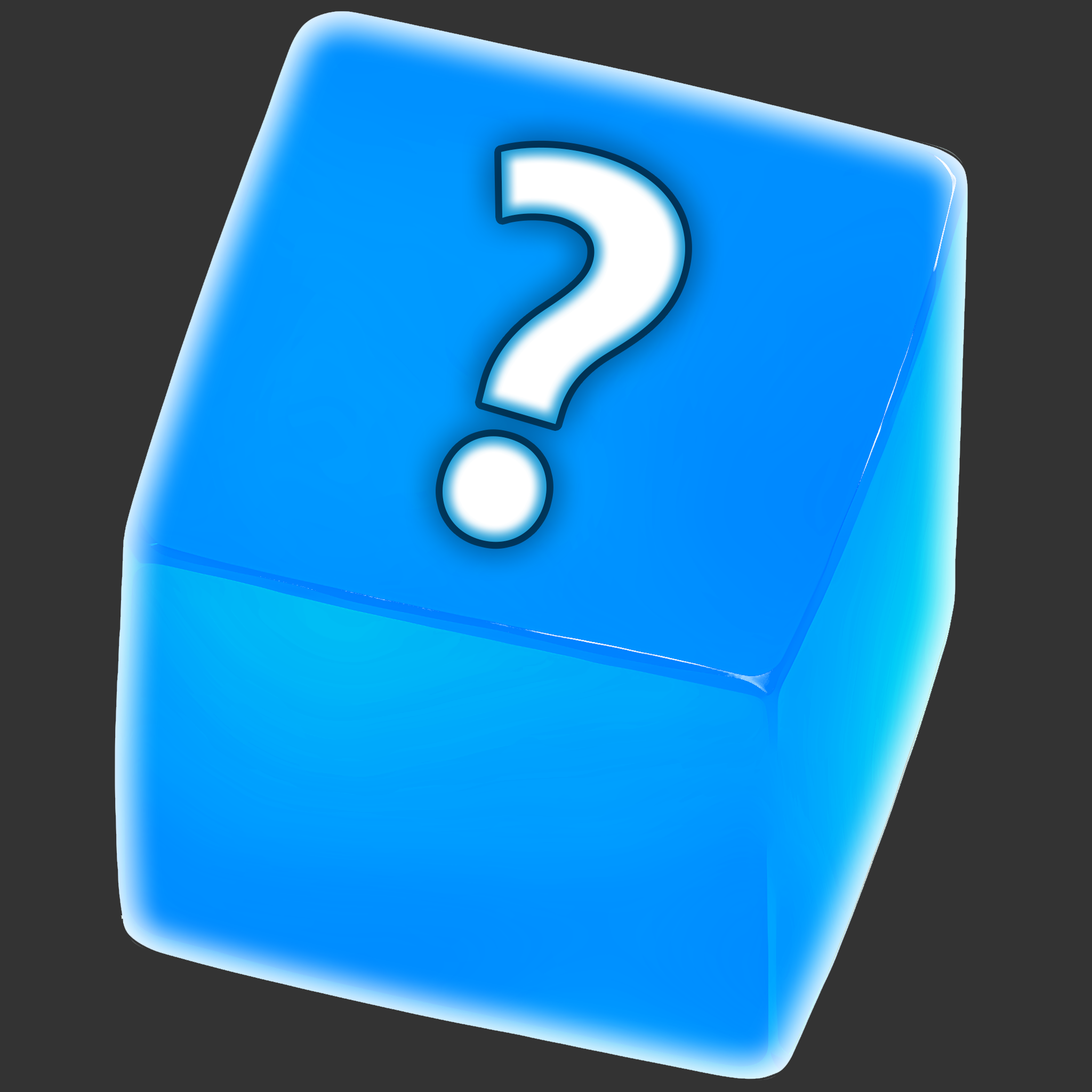
<style>
.page{position:relative;width:1092px;height:1092px;background:#333333}
.page>*{position:absolute;margin:0}
.t1{font:576.9px "MyriadPro-Bold";letter-spacing:0.02em;color:#ffffff}
</style>
<div class="page">
<p class="t1" style="left:443px;top:147px;width:242px;height:395px;rotate:16deg">?</p>
</div>
